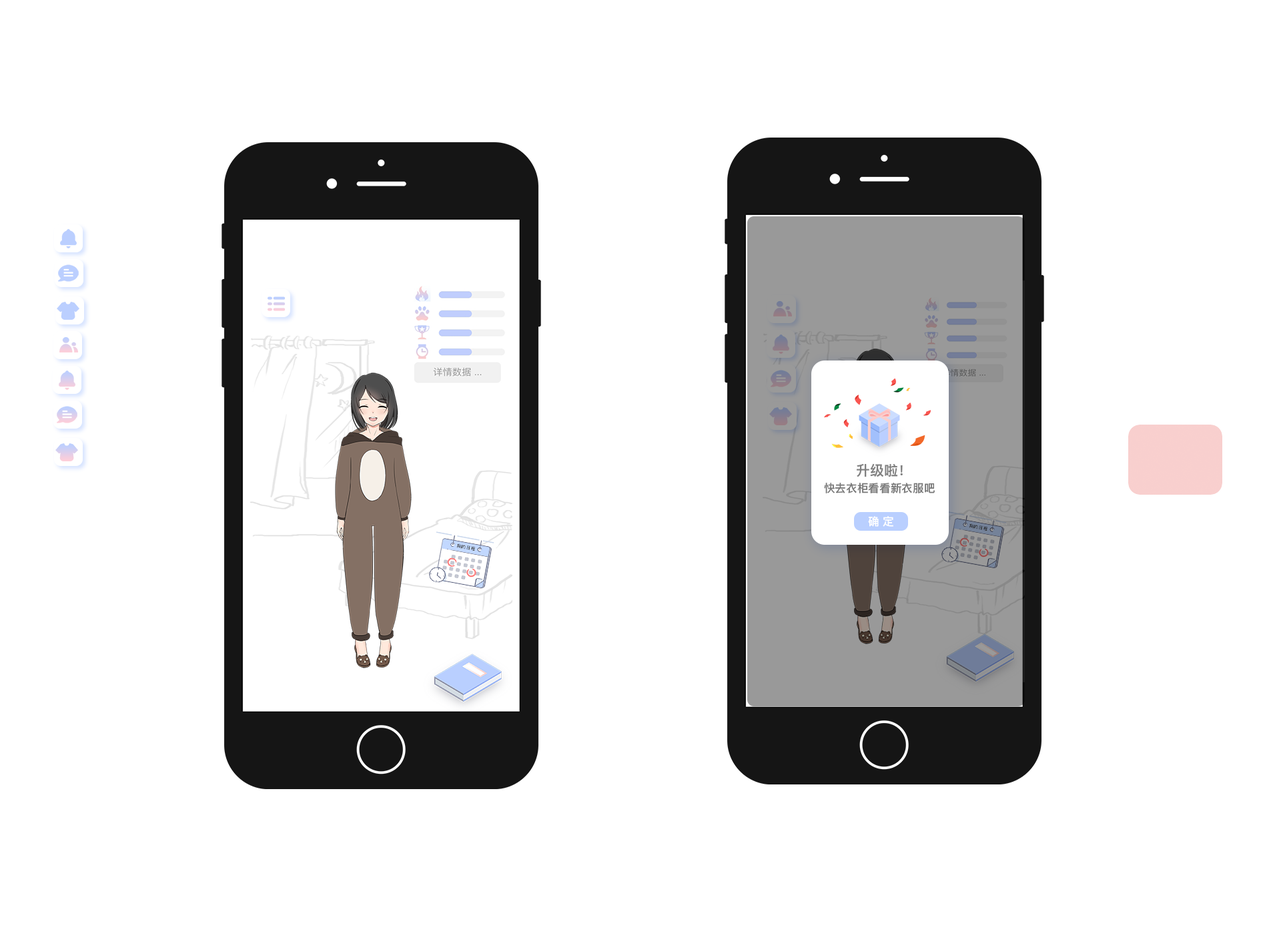
<style>
.page{position:relative;width:1261px;height:946px;background:#ffffff}
.page>*{position:absolute;margin:0}
.t1{font:13.9px "PingFangSC-Semibold";color:#808080}
.t2{font:11.1px "PingFangSC-Semibold";color:#777777}
.t3{font:11.1px "PingFangSC-Semibold";color:#ffffff}
</style>
<div class="page">
<p class="t1" style="left:857px;top:463px;width:46px;height:14px">升级啦！</p>
<p class="t2" style="left:824px;top:482px;width:111px;height:11px">快去衣柜看看新衣服吧</p>
<p class="t3" style="left:868px;top:516px;width:25px;height:10px">确 定</p>
</div>
